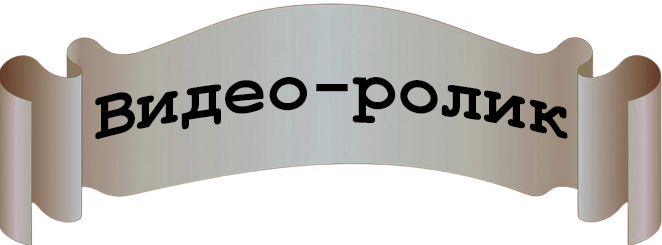
<style>
.page{position:relative;width:662px;height:245px;background:#ffffff}
.page>*{position:absolute;margin:0}
.t1{font:72px "CourierNewPS-BoldMT";color:#000000}
</style>
<div class="page">
<p class="t1" style="left:95px;top:77px;width:473px;height:63px">Видео-ролик</p>
</div>
